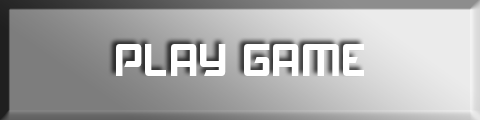
<style>
.page{position:relative;width:480px;height:120px}
.page>*{position:absolute;margin:0}
.t1{font:43px "Akashi";color:#ffffff}
</style>
<div class="page">
<p class="t1" style="left:116px;top:44px;width:248px;height:32px">PLAY GAME</p>
</div>
